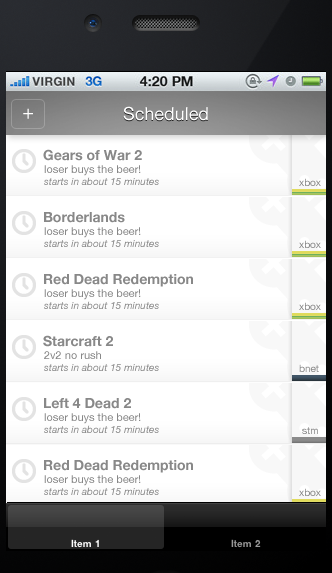
<style>
.page{position:relative;width:332px;height:573px;background:#ffffff}
.page>*{position:absolute;margin:0}
.t1{font:20px "HelveticaNeue";color:#ffffff}
.t2{font:18px "HelveticaNeue";color:#ffffff}
.t3{font:14px "HelveticaNeue-Bold";color:#888888}
.t4{font:11px "HelveticaNeue";color:#888888}
.t5{font:10px "HelveticaNeue-Italic";color:#888888}
.t6{font:10px "HelveticaNeue";color:#888888}
</style>
<div class="page">
<p class="t1" style="left:23px;top:108px;width:10px;height:11px">+</p>
<p class="t2" style="left:123px;top:106px;width:85px;height:15px">Scheduled</p>
<p class="t3" style="left:43px;top:149px;width:99px;height:12px">Gears of War 2</p>
<p class="t4" style="left:44px;top:165px;width:97px;height:11px">loser buys the beer!</p>
<p class="t5" style="left:44px;top:177px;width:115px;height:8px">starts in about 15 minutes</p>
<p class="t6" style="left:299px;top:178px;width:22px;height:8px">xbox</p>
<p class="t3" style="left:44px;top:212px;width:81px;height:11px">Borderlands</p>
<p class="t4" style="left:44px;top:227px;width:97px;height:11px">loser buys the beer!</p>
<p class="t5" style="left:44px;top:239px;width:115px;height:8px">starts in about 15 minutes</p>
<p class="t6" style="left:299px;top:240px;width:22px;height:8px">xbox</p>
<p class="t3" style="left:44px;top:274px;width:149px;height:13px">Red Dead Redemption</p>
<p class="t4" style="left:44px;top:289px;width:97px;height:11px">loser buys the beer!</p>
<p class="t5" style="left:44px;top:301px;width:115px;height:8px">starts in about 15 minutes</p>
<p class="t6" style="left:299px;top:302px;width:22px;height:8px">xbox</p>
<p class="t3" style="left:43px;top:335px;width:70px;height:12px">Starcraft 2</p>
<p class="t4" style="left:44px;top:351px;width:57px;height:8px">2v2 no rush</p>
<p class="t5" style="left:44px;top:363px;width:115px;height:8px">starts in about 15 minutes</p>
<p class="t6" style="left:299px;top:364px;width:20px;height:8px">bnet</p>
<p class="t3" style="left:44px;top:398px;width:87px;height:11px">Left 4 Dead 2</p>
<p class="t4" style="left:44px;top:413px;width:97px;height:11px">loser buys the beer!</p>
<p class="t5" style="left:44px;top:425px;width:115px;height:8px">starts in about 15 minutes</p>
<p class="t6" style="left:302px;top:427px;width:16px;height:7px">stm</p>
<p class="t3" style="left:44px;top:460px;width:149px;height:13px">Red Dead Redemption</p>
<p class="t4" style="left:44px;top:475px;width:97px;height:11px">loser buys the beer!</p>
<p class="t5" style="left:44px;top:487px;width:115px;height:8px">starts in about 15 minutes</p>
<p class="t6" style="left:299px;top:488px;width:22px;height:8px">xbox</p>
</div>
